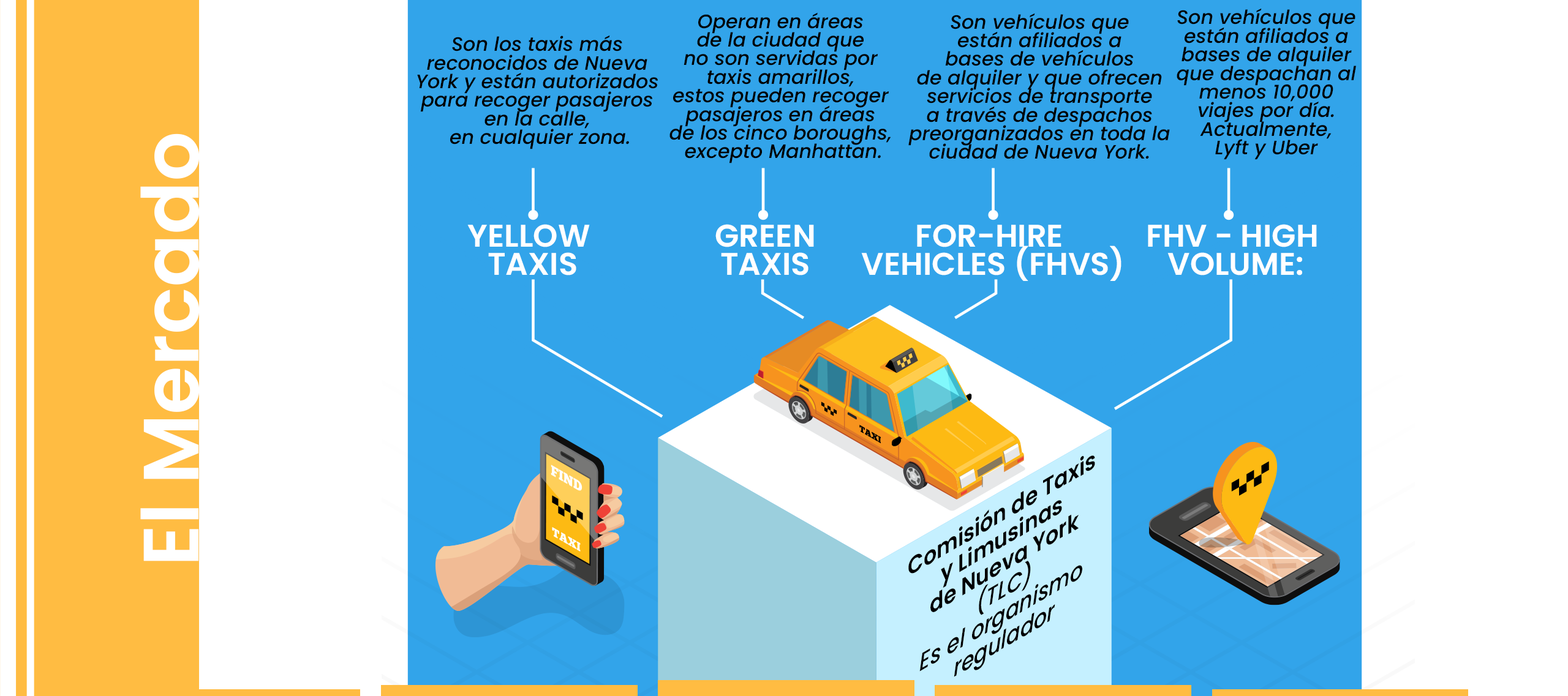
<style>
.page{position:relative;width:1568px;height:696px;background:#ffffff}
.page>*{position:absolute;margin:0}
.t1{font:19.4px/18.6px "Poppins-MediumItalic";color:#000000}
.t2{font:78.2px "Poppins-SemiBold";color:#ffffff}
.t3{font:31.4px/28.1px "Poppins-SemiBold";color:#ffffff;text-transform:uppercase}
.t4{font:24.2px/25.5px "Poppins-SemiBold";color:#000000}
.t5{font:24.2px/25.5px "Poppins-MediumItalic";color:#000000}
</style>
<div class="page">
<p class="t1" style="left:669px;top:12px;width:222px;height:152px;text-align:center">Operan en áreas <br>de la ciudad que <br>no son servidas por <br>taxis amarillos, <br>estos pueden recoger <br>pasajeros en áreas <br>de los cinco boroughs, <br>excepto Manhattan.</p>
<p class="t1" style="left:908px;top:13px;width:262px;height:146px;text-align:center">Son vehículos que <br>están afiliados a <br>bases de vehículos <br>de alquiler y que ofrecen <br>servicios de transporte <br>a través de despachos <br>preorganizados en toda la <br>ciudad de Nueva York.</p>
<p class="t1" style="left:1177px;top:8px;width:179px;height:152px;text-align:center">Son vehículos que <br>están afiliados a <br>bases de alquiler <br>que despachan al <br>menos 10,000 <br>viajes por día. <br>Actualmente, <br>Lyft y Uber</p>
<p class="t1" style="left:417px;top:35px;width:241px;height:114px;text-align:center">Son los taxis más <br>reconocidos de Nueva <br>York y están autorizados <br>para recoger pasajeros <br>en la calle, <br>en cualquier zona.</p>
<p class="t2" style="left:140px;top:134px;width:60px;height:428px">El Mercado</p>
<p class="t3" style="left:467px;top:224px;width:123px;height:52px;text-align:center">Yellow <br>TaxiS</p>
<p class="t3" style="left:715px;top:224px;width:99px;height:52px;text-align:center">gREEN<br>TaxiS</p>
<p class="t3" style="left:861px;top:224px;width:260px;height:57px;text-align:center">For-Hire <br>Vehicles (FHVs)</p>
<p class="t3" style="left:1148px;top:224px;width:169px;height:52px;text-align:center">FHV - High <br>Volume:</p>
<p class="t4" style="left:908px;top:456px;width:187px;height:221px;text-align:center;rotate:-30deg">Comisión de Taxis <br>y Limusinas <br> de Nueva York <br><span class="t5">(TLC)<br>Es el organismo <br>regulador</span></p>
</div>
